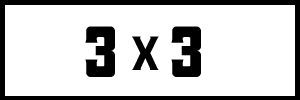
<style>
.page{position:relative;width:300px;height:100px;background:#ffffff}
.page>*{position:absolute;margin:0}
.t1{font:72px "UniformBoldBold";letter-spacing:0.2em;color:#000000}
.t2{font:48px "UniformBoldBold";letter-spacing:0.2em;color:#000000}
</style>
<div class="page">
<p class="t1" style="left:85px;top:26px;width:116px;height:51px">3<span class="t2">x</span>3</p>
</div>
